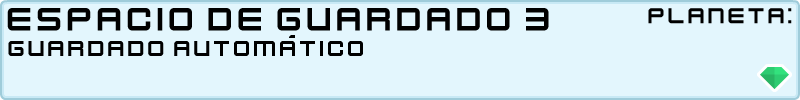
<style>
.page{position:relative;width:800px;height:100px;background:#e3f6fd}
.page>*{position:absolute;margin:0}
.t1{font:36px "KenVector-Future";color:#000000}
.t2{font:24px "KenVector-Future";color:#000000}
</style>
<div class="page">
<p class="t1" style="left:7px;top:8px;width:542px;height:23px">espacio de guardado 3</p>
<p class="t2" style="left:648px;top:8px;width:144px;height:16px">planeta:</p>
<p class="t2" style="left:8px;top:35px;width:355px;height:21px">guardado automático</p>
</div>
